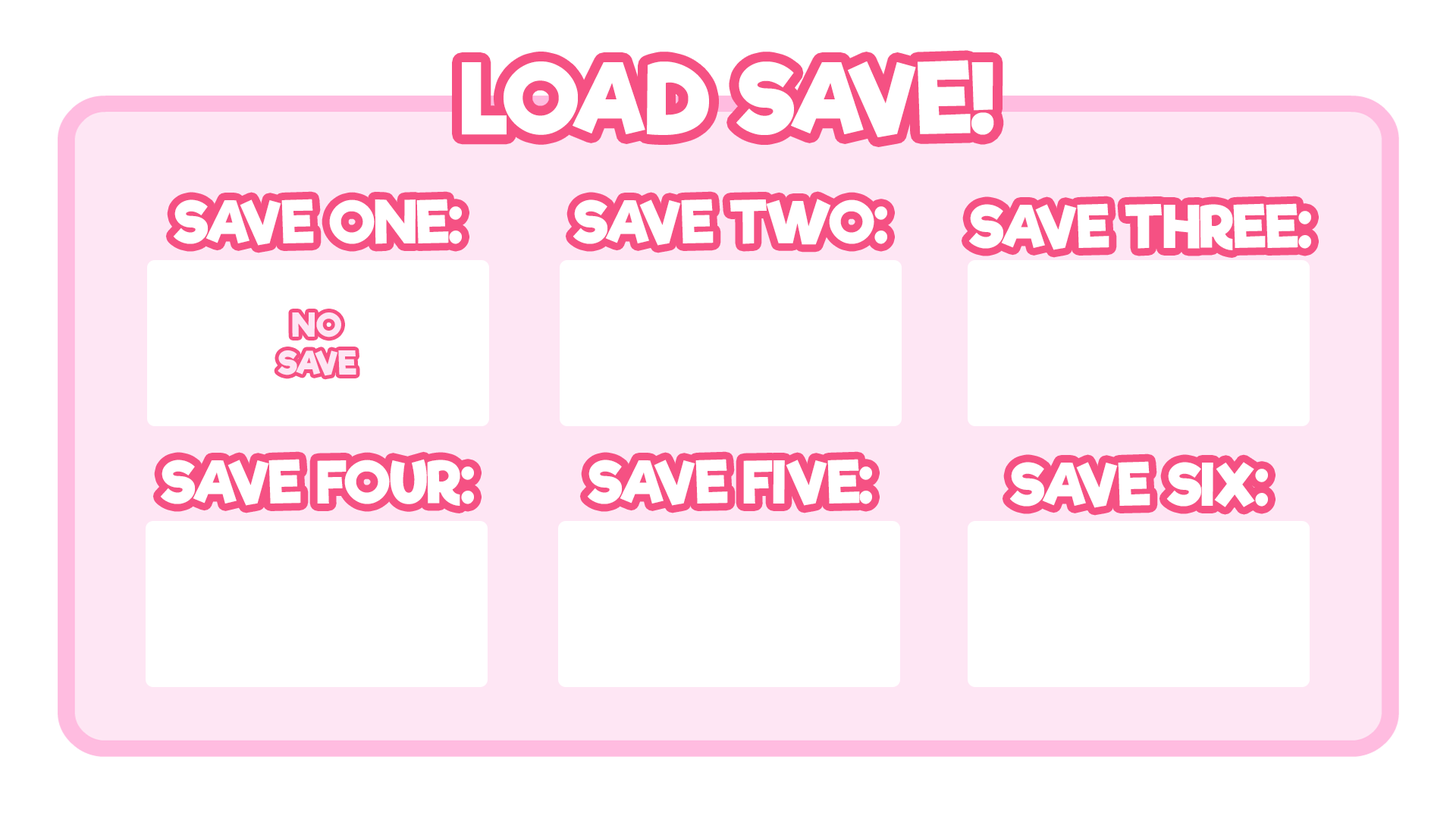
<style>
.page{position:relative;width:1456px;height:819px;background:#ffffff}
.page>*{position:absolute;margin:0}
.t1{font:94.8px "RifficFree-Bold";color:#ffffff;text-transform:uppercase}
.t2{font:56.9px "RifficFree-Bold";color:#ffffff;text-transform:uppercase}
.t3{font:31.6px "RifficFree-Bold";color:#fee6f4;text-transform:uppercase}
</style>
<div class="page">
<p class="t1" style="left:462px;top:60px;width:532px;height:77px">Load save!</p>
<p class="t2" style="left:173px;top:199px;width:289px;height:47px">save one:</p>
<p class="t2" style="left:573px;top:199px;width:314px;height:47px">save two:</p>
<p class="t2" style="left:968px;top:203px;width:343px;height:47px">save three:</p>
<p class="t3" style="left:278px;top:312px;width:78px;height:64px;text-align:center">no<br>save</p>
<p class="t2" style="left:160px;top:459px;width:314px;height:47px">save four:</p>
<p class="t2" style="left:587px;top:459px;width:285px;height:47px">save five:</p>
<p class="t2" style="left:1009px;top:461px;width:259px;height:47px">save six:</p>
</div>
